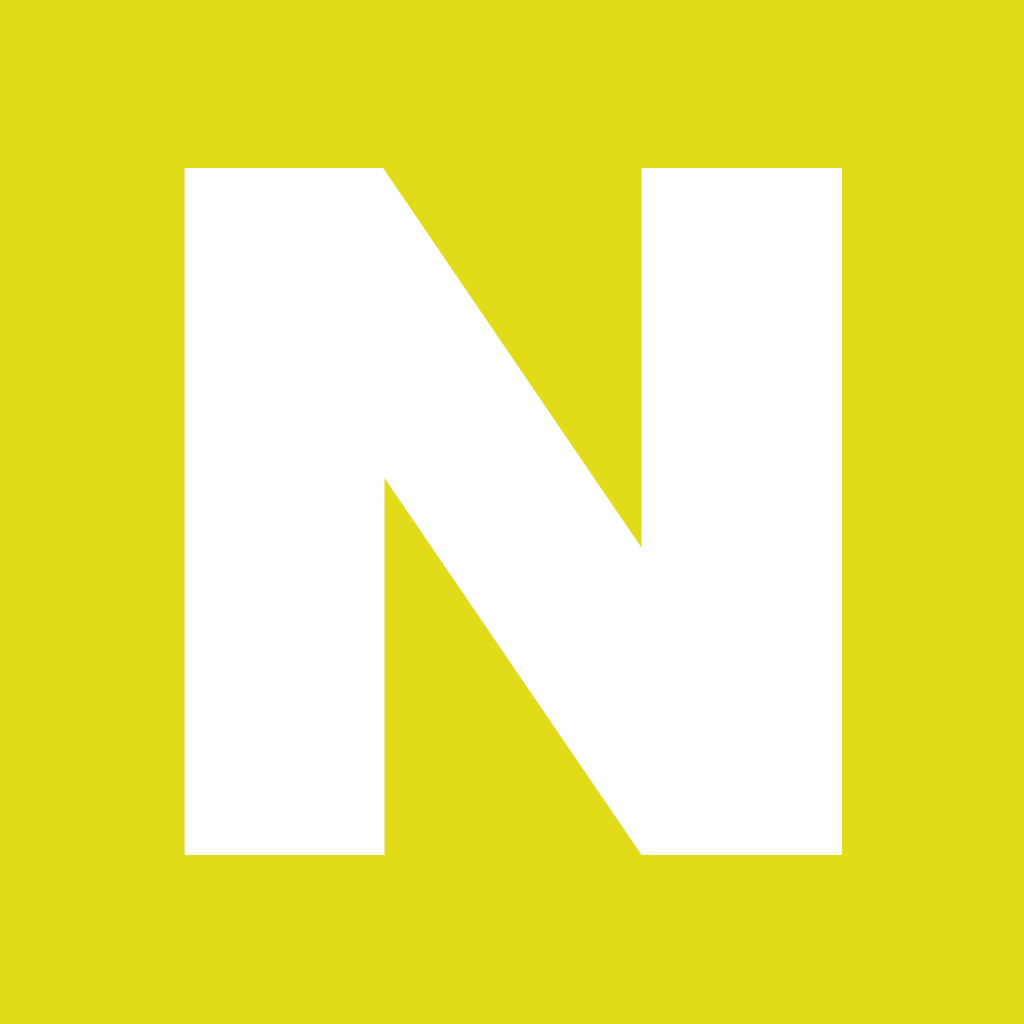
<style>
.page{position:relative;width:1024px;height:1024px;background:#e2db19}
.page>*{position:absolute;margin:0}
.t1{font:960px "Arial-Black";color:#ffffff}
</style>
<div class="page">
<p class="t1" style="left:184px;top:168px;width:658px;height:687px">N</p>
</div>
